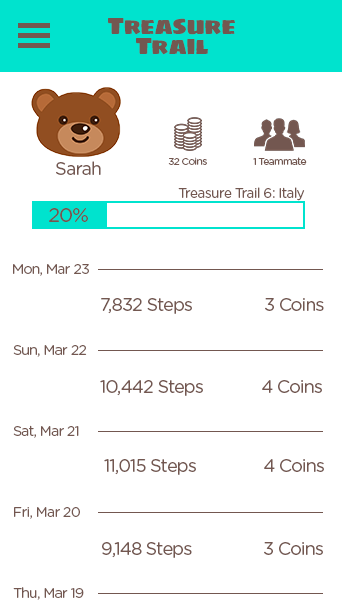
<style>
.page{position:relative;width:342px;height:612px;background:#ffffff}
.page>*{position:absolute;margin:0}
.t1{font:24px "Sigmar";letter-spacing:-0.05em;color:#735750}
.t2{font:18px "GothamRounded-Book";letter-spacing:-0.05em;color:#735750}
.t3{font:10px "GothamRounded-Book";letter-spacing:-0.05em;color:#735750}
.t4{font:14px "GothamRounded-Book";letter-spacing:-0.05em;color:#735750}
.t5{font:20px "GothamRounded-Book";letter-spacing:-0.05em;color:#735750}
</style>
<div class="page">
<p class="t1" style="left:108px;top:18px;width:127px;height:37px">Treasure Trail</p>
<p class="t2" style="left:56px;top:161px;width:45px;height:14px">Sarah</p>
<p class="t3" style="left:168px;top:157px;width:39px;height:8px">32 Coins</p>
<p class="t3" style="left:253px;top:157px;width:54px;height:8px">1 Teammate</p>
<p class="t4" style="left:178px;top:187px;width:127px;height:14px">Treasure Trail 6: Italy</p>
<p class="t5" style="left:49px;top:208px;width:39px;height:14px">20%</p>
<p class="t4" style="left:13px;top:264px;width:76px;height:12px">Mon, Mar 23</p>
<p class="t2" style="left:101px;top:298px;width:223px;height:16px">7,832 Steps                3 Coins</p>
<p class="t4" style="left:13px;top:345px;width:74px;height:12px">Sun, Mar 22</p>
<p class="t2" style="left:100px;top:380px;width:222px;height:16px">10,442 Steps             4 Coins</p>
<p class="t4" style="left:13px;top:425px;width:66px;height:13px">Sat, Mar 21</p>
<p class="t2" style="left:104px;top:459px;width:220px;height:16px">11,015 Steps               4 Coins</p>
<p class="t4" style="left:14px;top:507px;width:66px;height:12px">Fri, Mar 20</p>
<p class="t2" style="left:102px;top:542px;width:221px;height:16px">9,148 Steps                3 Coins</p>
<p class="t4" style="left:13px;top:587px;width:71px;height:13px">Thu, Mar 19</p>
</div>
